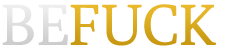
<style>
.page{position:relative;width:230px;height:50px;background:#ffffff}
.page>*{position:absolute;margin:0}
.t1{font:58px "Poly-Regular";color:#dddddd}
.t2{font:58px "Poly-Regular";color:#d8a81e}
</style>
<div class="page">
<p class="t1" style="left:2px;top:4px;width:66px;height:41px">BE</p>
<p class="t2" style="left:70px;top:4px;width:146px;height:42px">FUCK</p>
</div>
